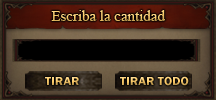
<style>
.page{position:relative;width:216px;height:100px}
.page>*{position:absolute;margin:0}
.t1{font:14.7px "TimesNewRomanPSMT"}
.t2{font:12px "FranklinGothic-Demi";scale:1.07 1}
</style>
<div class="page">
<p class="t1" style="left:51px;top:10px;width:114px;height:11px">Escriba la cantidad</p>
<p class="t2" style="left:45px;top:77px;width:34px;height:8px">TIRAR</p>
<p class="t2" style="left:120px;top:76px;width:69px;height:10px">TIRAR TODO</p>
</div>
